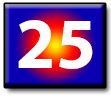
<style>
.page{position:relative;width:111px;height:96px;background:#ffffff}
.page>*{position:absolute;margin:0}
.t1{font:72px "MyriadPro-Bold";color:#ffffff}
</style>
<div class="page">
<p class="t1" style="left:18px;top:20px;width:75px;height:49px">25</p>
</div>
